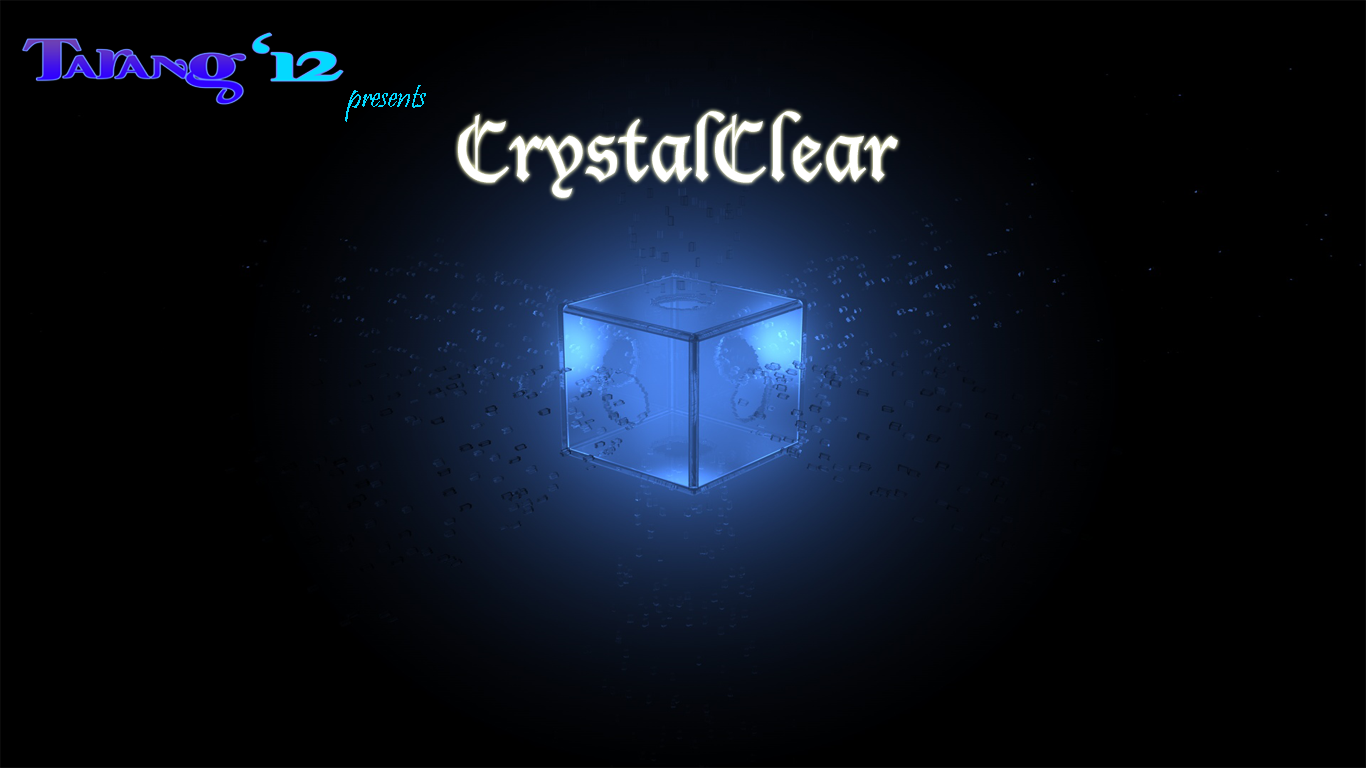
<style>
.page{position:relative;width:1366px;height:768px;background:#000000}
.page>*{position:absolute;margin:0}
.t1{font:33.3px "Pristina-Regular";color:#04d9ff}
.t2{font:81.4px "LucidaBlackletter";color:#ffffff;scale:0.97 1}
</style>
<div class="page">
<p class="t1" style="left:345px;top:85px;width:81px;height:37px">presents</p>
<p class="t2" style="left:458px;top:111px;width:440px;height:87px">CrystalClear</p>
</div>
